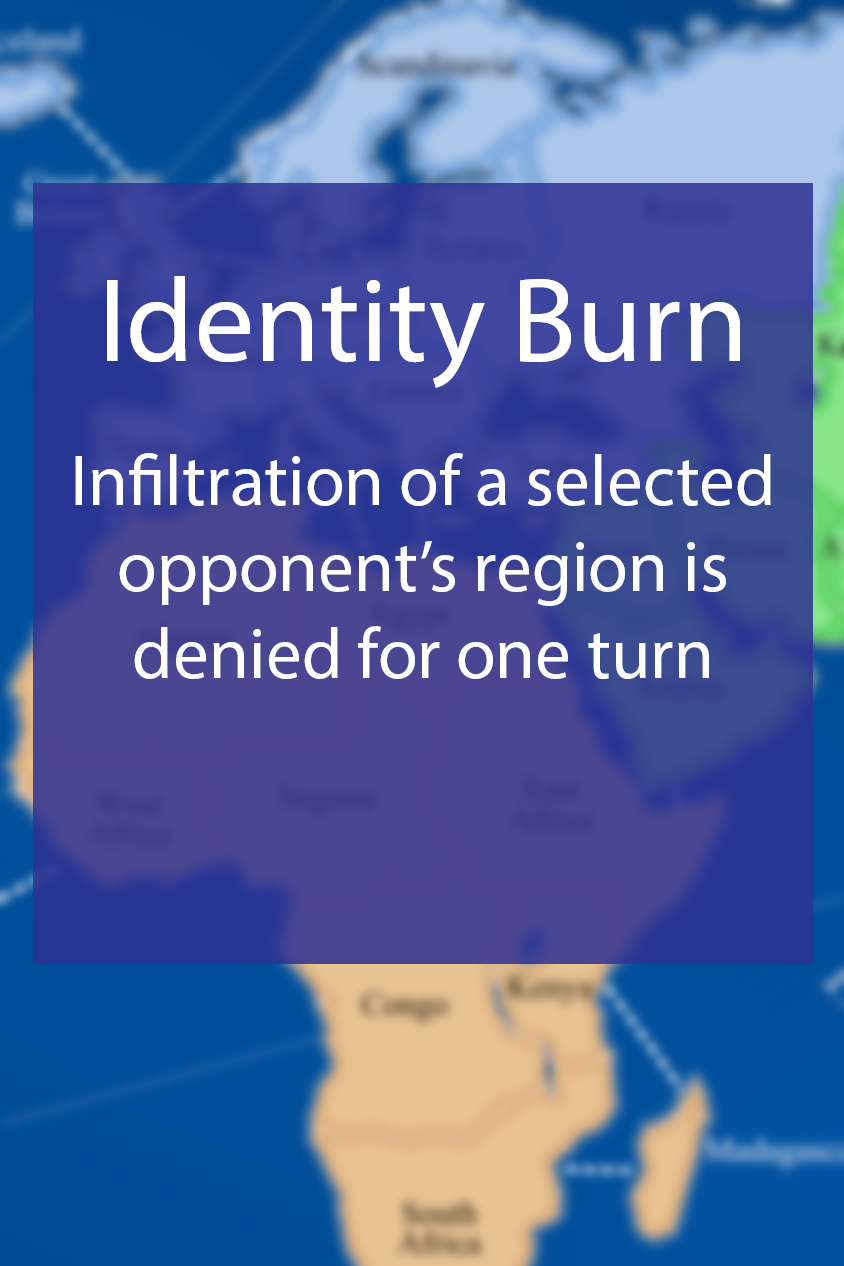
<style>
.page{position:relative;width:844px;height:1266px}
.page>*{position:absolute;margin:0}
.t1{font:72px "MyriadPro-Regular";color:#ffffff}
.t2{font:48px "MyriadPro-Regular";color:#ffffff}
.t3{font:120px "MyriadPro-Regular";color:#ffffff}
</style>
<div class="page">
<p class="t1" style="left:75px;top:276px;width:696px;height:403px;text-align:center"><span class="t2"><br></span><span class="t3">Identity Burn<br><br><br></span>Infiltration of a selected opponent’s region is denied for one turn</p>
</div>
